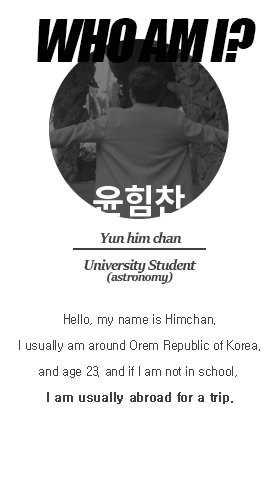
<style>
.page{position:relative;width:280px;height:500px;background:#ffffff}
.page>*{position:absolute;margin:0}
.t1{font:55px "Impact";letter-spacing:-0.04em;color:#000000;font-style:italic}
.t2{font:34.5px "NotoSansCJKkr-Bold";letter-spacing:-0.04em;color:#ffffff}
.t3{font:16px "SitkaBanner-BoldItalic";letter-spacing:-0.04em;color:#3f3f3f}
.t4{font:14px "SitkaBanner-BoldItalic";letter-spacing:-0.04em;color:#3f3f3f}
.t5{font:12px/26px "Gulim";letter-spacing:-0.025em;color:#3f3f3f}
.t6{font:12px/26px "Gulim";letter-spacing:-0.025em;color:#3f3f3f;font-weight:bold}
</style>
<div class="page">
<p class="t1" style="left:37px;top:18px;width:219px;height:45px">WHO AM I?</p>
<p class="t2" style="left:93px;top:185px;width:92px;height:32px">윤힘찬</p>
<p class="t3" style="left:100px;top:232px;width:82px;height:11px">Yun him chan</p>
<p class="t3" style="left:84px;top:259px;width:113px;height:14px">University Student</p>
<p class="t4" style="left:107px;top:272px;width:66px;height:12px">(astronomy)</p>
<p class="t5" style="left:19px;top:314px;width:241px;height:90px;text-align:center">Hello, my name is Himchan.<br>I usually am around Orem Republic of Korea.<br>and age 23. and if I am not in school, <br><span class="t6">I am usually abroad for a trip.</span></p>
</div>
